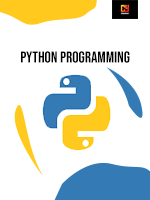
<style>
.page{position:relative;width:150px;height:200px;background:#ffffff}
.page>*{position:absolute;margin:0}
.t1{font:15.6px "BebasNeue-Regular";color:#000000}
.t2{font:16.8px "BebasNeue-Regular";color:#000000}
</style>
<div class="page">
<p class="t1" style="left:21px;top:51px;width:109px;height:12px"><span class="t2"> </span>python programming</p>
</div>
